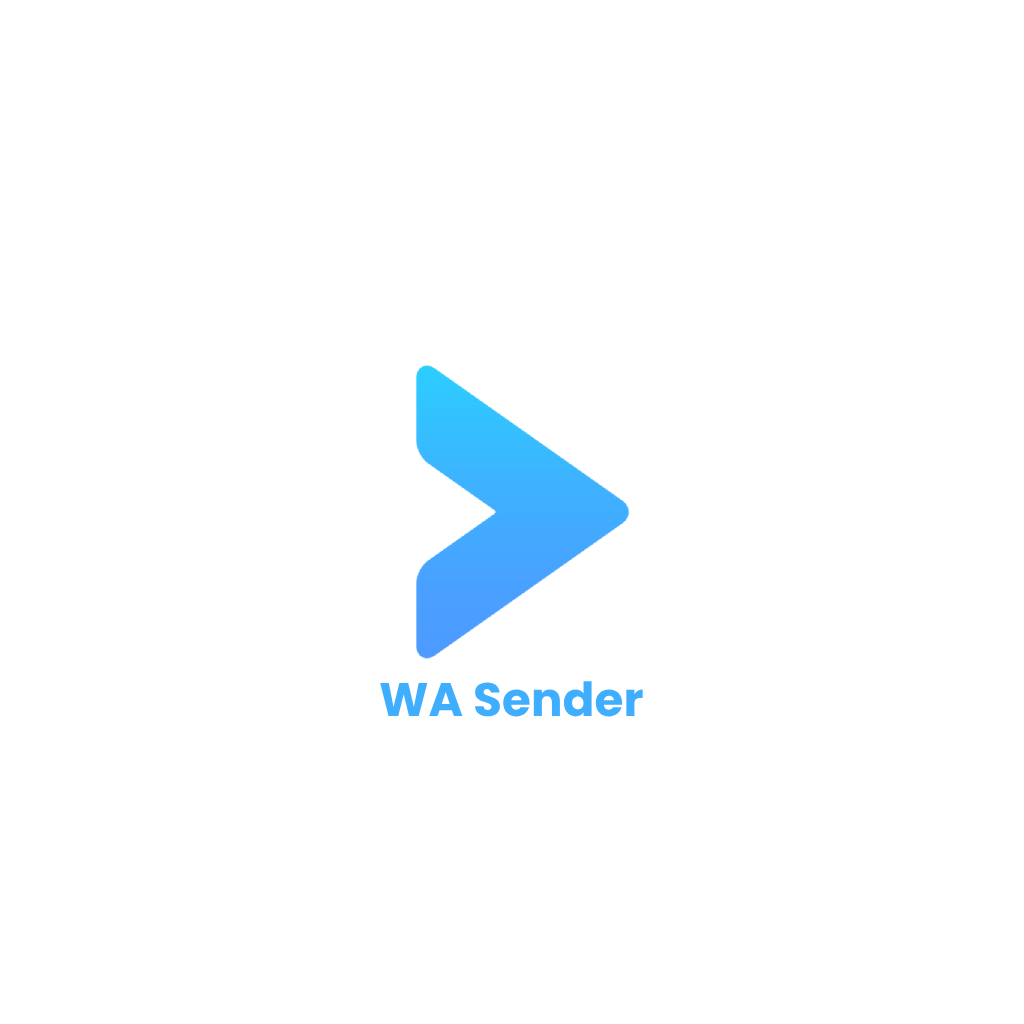
<style>
.page{position:relative;width:1024px;height:1024px;background:#ffffff}
.page>*{position:absolute;margin:0}
.t1{font:47px "Poppins-Bold";color:#40aeff}
</style>
<div class="page">
<p class="t1" style="left:380px;top:681px;width:263px;height:36px">WA Sender</p>
</div>
